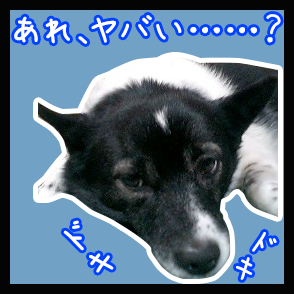
<style>
.page{position:relative;width:294px;height:294px;background:#71a1c5}
.page>*{position:absolute;margin:0}
.t1{font:40.8px "APJapanesefont";color:#ffffff}
.t2{font:40.5px "APJapanesefont";color:#ffffff}
.t3{font:35px "APJapanesefont";color:#ffffff}
</style>
<div class="page">
<p class="t1" style="left:14px;top:14px;width:267px;height:30px">あれ、ヤバい……？</p>
<p class="t2" style="left:63px;top:220px;width:51px;height:53px;rotate:-44deg">ドキ</p>
<p class="t3" style="left:236px;top:232px;width:41px;height:48px;rotate:35deg">ドキ</p>
</div>
